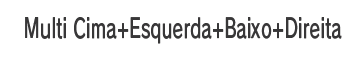
<style>
.page{position:relative;width:342px;height:60px;background:#ffffff}
.page>*{position:absolute;margin:0}
.t1{font:26.7px "RodinPro-DB";letter-spacing:0.008em;color:#383738;scale:0.65 1}
</style>
<div class="page">
<p class="t1" style="left:25px;top:17px;width:317px;height:27px">Multi Cima+Esquerda+Baixo+Direita</p>
</div>
